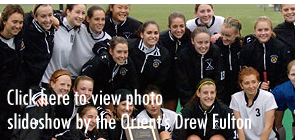
<style>
.page{position:relative;width:300px;height:140px}
.page>*{position:absolute;margin:0}
.t1{font:24px/24px "TwCenMT-Condensed";letter-spacing:-0.025em;color:#ffffff}
</style>
<div class="page">
<p class="t1" style="left:7px;top:89px;width:244px;height:45px">Click here to view photo<br>slideshow by the Orient’s Drew Fulton</p>
</div>
